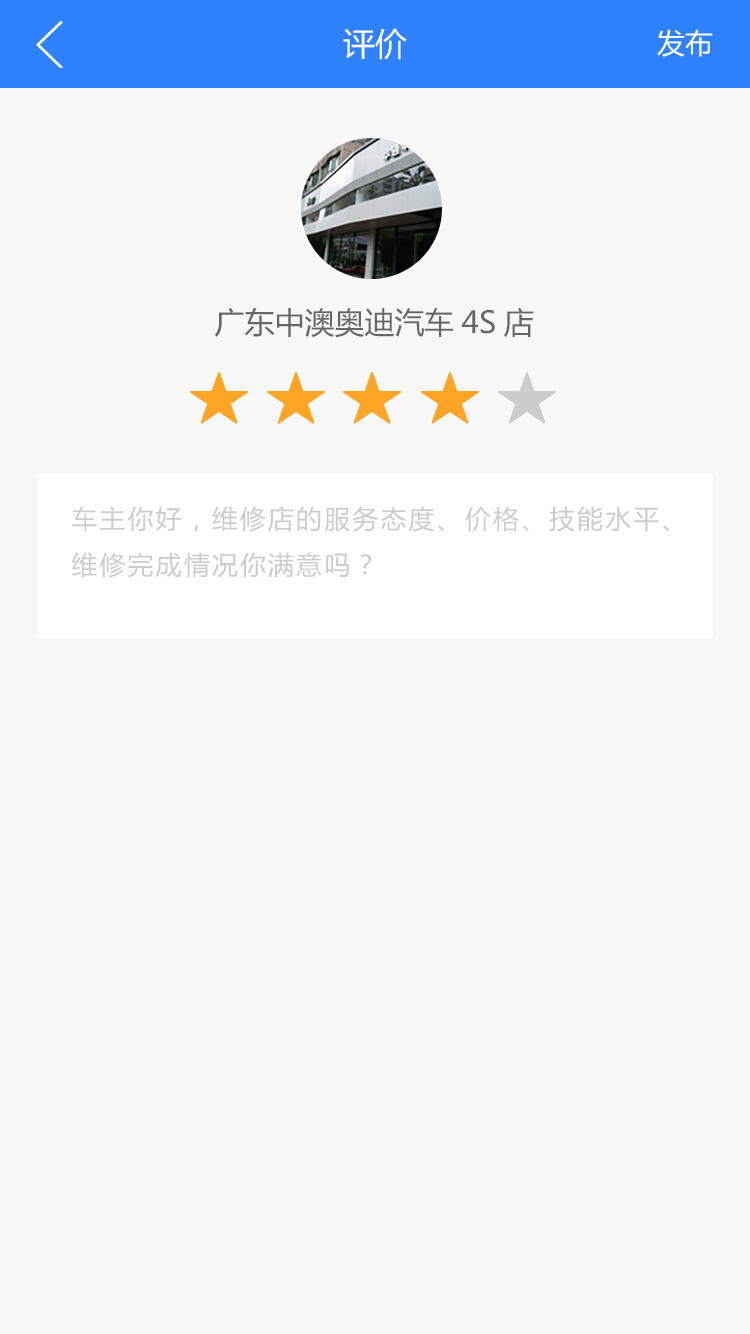
<style>
.page{position:relative;width:750px;height:1334px;background:#f8f8f8}
.page>*{position:absolute;margin:0}
.t1{font:32px "MicrosoftYaHei";color:#ffffff}
.t2{font:28px "MicrosoftYaHei";color:#ffffff}
.t3{font:30px "MicrosoftYaHei";color:#666666}
.t4{font:25.8px "MicrosoftYaHei";letter-spacing:0.09em;color:#cccccc}
</style>
<div class="page">
<p class="t1" style="left:343px;top:28px;width:64px;height:32px">评价</p>
<p class="t2" style="left:657px;top:29px;width:56px;height:28px">发布</p>
<p class="t3" style="left:214px;top:307px;width:320px;height:31px">广东中澳奥迪汽车4S店</p>
<p class="t4" style="left:71px;top:506px;width:599px;height:72px">车主你好，维修店的服务态度、价格、技能水平、<br>维修完成情况你满意吗？</p>
</div>
